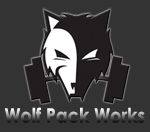
<style>
.page{position:relative;width:150px;height:132px;background:#333333}
.page>*{position:absolute;margin:0}
.t1{font:19.7px "CenturyGothic-Bold";scale:0.9 1}
</style>
<div class="page">
<p class="t1" style="left:4px;top:107px;width:141px;height:16px">Wolf Pack Works</p>
</div>
